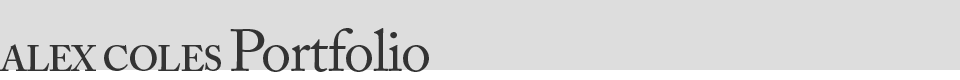
<style>
.page{position:relative;width:960px;height:80px;background:#dddddd}
.page>*{position:absolute;margin:0}
.t1{font:60px "ACaslonPro-Regular";letter-spacing:-0.025em;color:#333333}
.t2{font:36px "ACaslonPro-Semibold";letter-spacing:-0.025em;color:#333333}
</style>
<div class="page">
<p class="t1" style="left:230px;top:28px;width:199px;height:44px">Portfolio</p>
<p class="t2" style="left:0px;top:44px;width:221px;height:27px">ALEX COLES</p>
</div>
